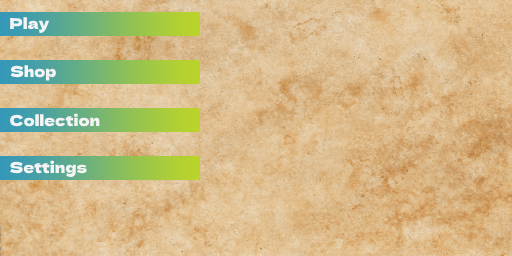
<style>
.page{position:relative;width:512px;height:256px}
.page>*{position:absolute;margin:0}
.t1{font:15px "DelaGothicOne-Regular";color:#f4f4f4}
</style>
<div class="page">
<p class="t1" style="left:10px;top:17px;width:40px;height:16px">Play</p>
<p class="t1" style="left:10px;top:65px;width:46px;height:16px">Shop</p>
<p class="t1" style="left:10px;top:113px;width:90px;height:14px">Collection</p>
<p class="t1" style="left:10px;top:160px;width:77px;height:17px">Settings</p>
</div>
